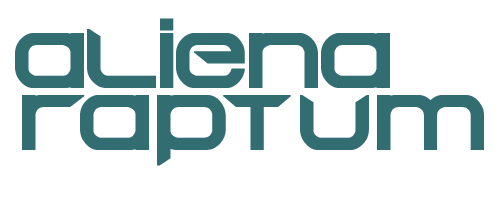
<style>
.page{position:relative;width:500px;height:200px;background:#ffffff}
.page>*{position:absolute;margin:0}
.t1{font:77.3px "Begokv15";color:#326d71;font-weight:bold}
.t2{font:77.3px "Begokv15";letter-spacing:0.06em;color:#326d71;font-weight:bold}
</style>
<div class="page">
<p class="t1" style="left:15px;top:18px;width:375px;height:70px">aliena</p>
<p class="t2" style="left:22px;top:95px;width:462px;height:71px">raptum</p>
</div>
